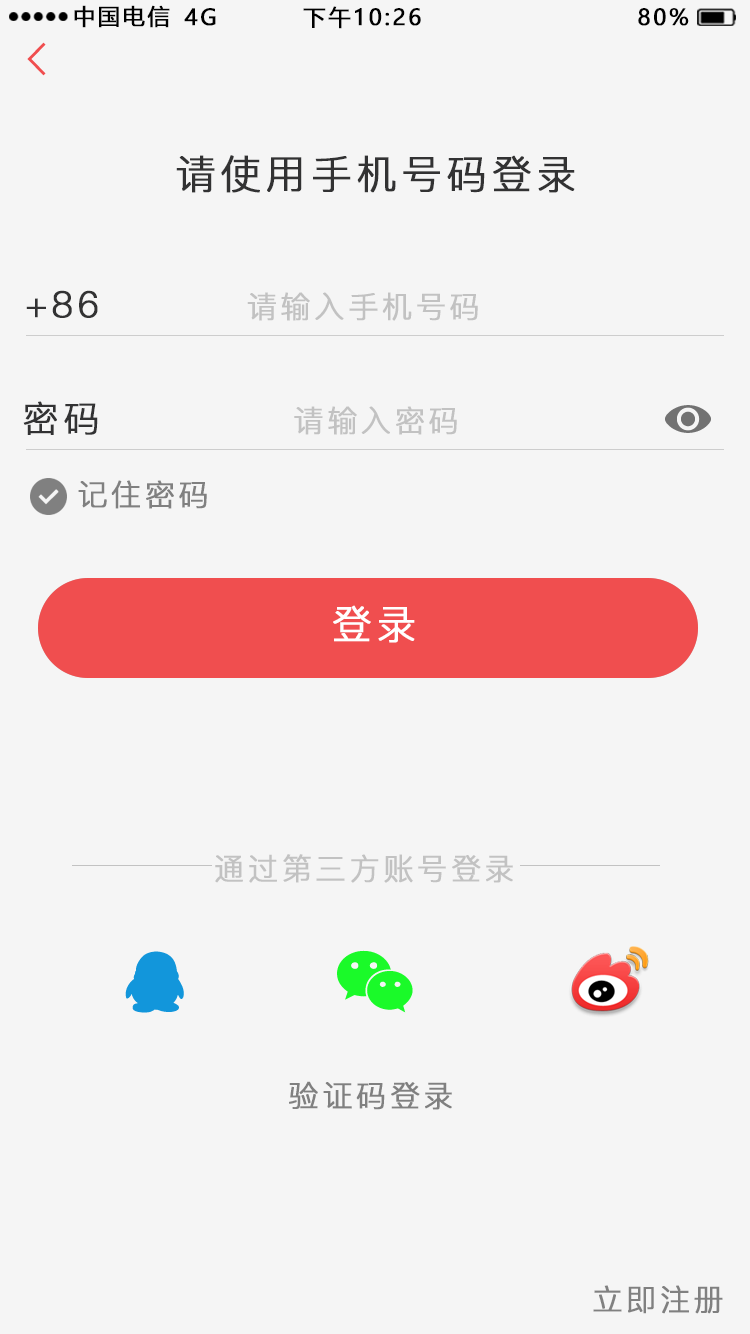
<style>
.page{position:relative;width:750px;height:1334px;background:#f5f5f5}
.page>*{position:absolute;margin:0}
.t1{font:22px "MicrosoftYaHei";letter-spacing:0.1em;color:#000000;text-transform:uppercase;font-weight:bold}
.t2{font:40px "PingFang-SC-Regular";letter-spacing:0.1em;color:#323233;text-transform:uppercase;font-weight:bold}
.t3{font:36px "PingFang-SC-Regular";letter-spacing:0.1em;color:#323233;text-transform:uppercase;font-weight:bold}
.t4{font:30px "PingFang-SC-Regular";letter-spacing:0.1em;color:#c2c2c2;text-transform:uppercase;font-weight:bold}
.t5{font:30px "PingFang-SC-Regular";letter-spacing:0.1em;color:#808080;text-transform:uppercase;font-weight:bold}
.t6{font:40px "PingFang-SC-Regular";letter-spacing:0.1em;color:#ffffff;text-transform:uppercase;font-weight:bold}
</style>
<div class="page">
<p class="t1" style="left:74px;top:5px;width:96px;height:23px">中国电信</p>
<p class="t1" style="left:303px;top:6px;width:118px;height:23px">下午10:26</p>
<p class="t1" style="left:184px;top:8px;width:32px;height:18px">4G</p>
<p class="t1" style="left:638px;top:8px;width:51px;height:18px">80%</p>
<p class="t2" style="left:176px;top:155px;width:399px;height:38px">请使用手机号码登录</p>
<p class="t3" style="left:26px;top:290px;width:72px;height:28px">+86</p>
<p class="t4" style="left:247px;top:292px;width:231px;height:29px">请输入手机号码</p>
<p class="t3" style="left:23px;top:401px;width:75px;height:34px">密码</p>
<p class="t4" style="left:294px;top:406px;width:163px;height:29px">请输入密码</p>
<p class="t5" style="left:78px;top:480px;width:129px;height:29px">记住密码</p>
<p class="t6" style="left:333px;top:605px;width:82px;height:38px">登录</p>
<p class="t4" style="left:215px;top:854px;width:298px;height:29px">通过第三方账号登录</p>
<p class="t5" style="left:289px;top:1081px;width:163px;height:29px">验证码登录</p>
<p class="t5" style="left:593px;top:1285px;width:130px;height:29px">立即注册</p>
</div>
